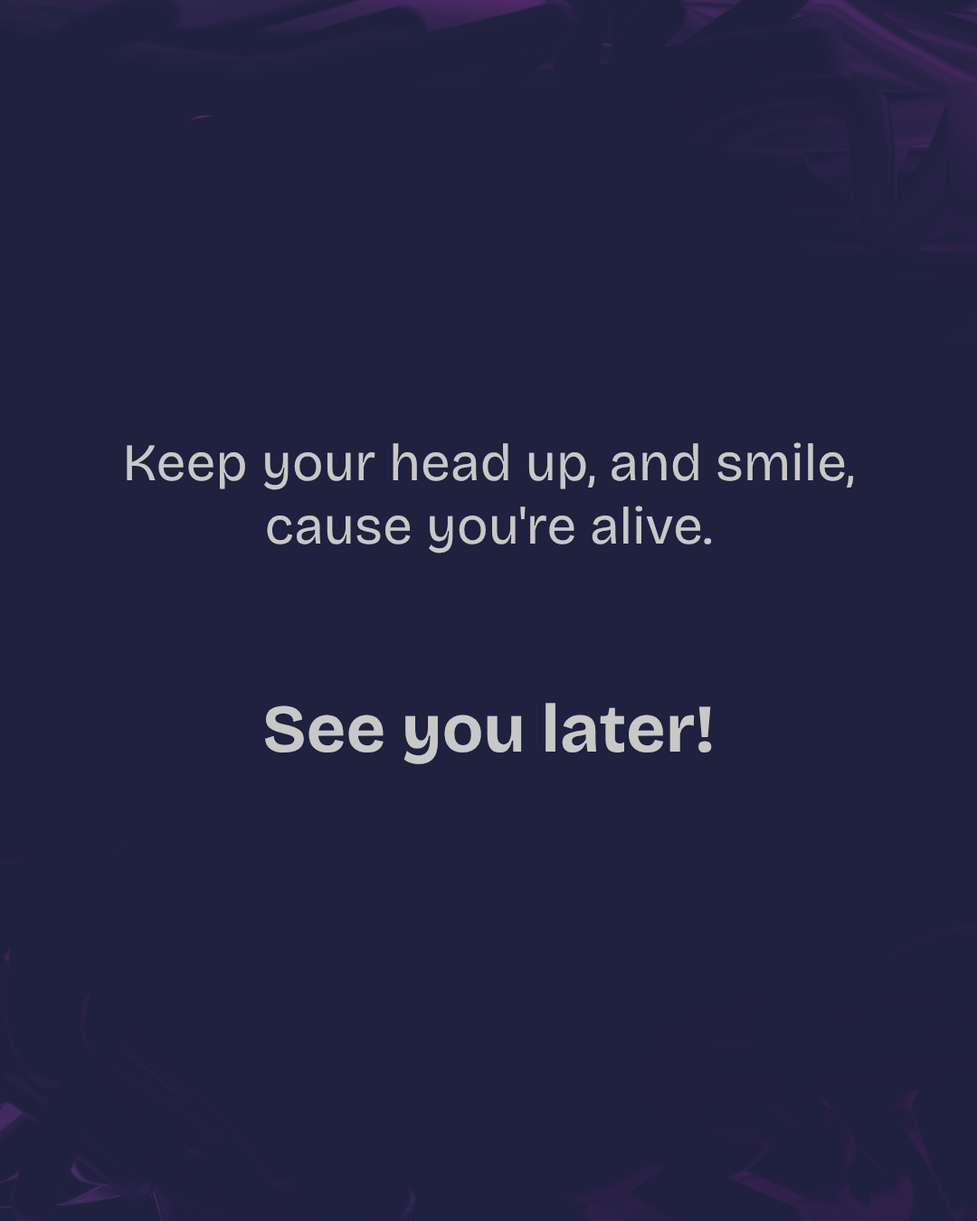
<style>
.page{position:relative;width:977px;height:1221px;background:#20203f}
.page>*{position:absolute;margin:0}
.t1{font:52.8px "BricolageGrotesque-Regular";color:#c8c8c8}
.t2{font:67.8px "BricolageGrotesque-Bold";color:#c8c8c8}
</style>
<div class="page">
<p class="t1" style="left:127px;top:442px;width:727px;height:322px;text-align:center">Keep your head up, and smile, cause you're alive.<br><br><br><span class="t2">See you later!</span></p>
</div>
